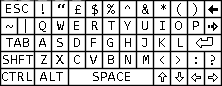
<style>
.page{position:relative;width:222px;height:86px;background:#ffffff}
.page>*{position:absolute;margin:0}
.t1{font:14px "Consolas";color:#000000}
</style>
<div class="page">
<p class="t1" style="left:6px;top:4px;width:22px;height:9px">ESC</p>
<p class="t1" style="left:42px;top:4px;width:2px;height:10px">!</p>
<p class="t1" style="left:58px;top:4px;width:7px;height:4px">“</p>
<p class="t1" style="left:75px;top:5px;width:6px;height:9px">£</p>
<p class="t1" style="left:92px;top:4px;width:6px;height:12px">$</p>
<p class="t1" style="left:107px;top:4px;width:8px;height:10px">%</p>
<p class="t1" style="left:125px;top:5px;width:5px;height:4px">^</p>
<p class="t1" style="left:142px;top:4px;width:7px;height:10px">&amp;</p>
<p class="t1" style="left:161px;top:4px;width:5px;height:6px">*</p>
<p class="t1" style="left:177px;top:3px;width:4px;height:13px">(</p>
<p class="t1" style="left:193px;top:3px;width:4px;height:13px">)</p>
<p class="t1" style="left:6px;top:25px;width:7px;height:3px">~</p>
<p class="t1" style="left:39px;top:21px;width:7px;height:11px">Q</p>
<p class="t1" style="left:57px;top:21px;width:7px;height:9px">W</p>
<p class="t1" style="left:74px;top:21px;width:5px;height:9px">E</p>
<p class="t1" style="left:92px;top:21px;width:6px;height:9px">R</p>
<p class="t1" style="left:108px;top:21px;width:7px;height:9px">T</p>
<p class="t1" style="left:124px;top:21px;width:7px;height:9px">Y</p>
<p class="t1" style="left:142px;top:21px;width:6px;height:9px">U</p>
<p class="t1" style="left:160px;top:21px;width:5px;height:9px">I</p>
<p class="t1" style="left:175px;top:21px;width:7px;height:9px">O</p>
<p class="t1" style="left:193px;top:21px;width:6px;height:9px">P</p>
<p class="t1" style="left:6px;top:38px;width:23px;height:9px">TAB</p>
<p class="t1" style="left:39px;top:38px;width:7px;height:9px">A</p>
<p class="t1" style="left:57px;top:38px;width:6px;height:9px">S</p>
<p class="t1" style="left:74px;top:38px;width:6px;height:9px">D</p>
<p class="t1" style="left:91px;top:38px;width:5px;height:9px">F</p>
<p class="t1" style="left:107px;top:38px;width:6px;height:9px">G</p>
<p class="t1" style="left:125px;top:38px;width:6px;height:9px">H</p>
<p class="t1" style="left:142px;top:38px;width:5px;height:9px">J</p>
<p class="t1" style="left:159px;top:38px;width:6px;height:9px">K</p>
<p class="t1" style="left:178px;top:38px;width:5px;height:9px">L</p>
<p class="t1" style="left:3px;top:55px;width:30px;height:9px">SHFT</p>
<p class="t1" style="left:41px;top:55px;width:6px;height:9px">Z</p>
<p class="t1" style="left:56px;top:55px;width:8px;height:9px">X</p>
<p class="t1" style="left:74px;top:55px;width:6px;height:9px">C</p>
<p class="t1" style="left:90px;top:55px;width:7px;height:9px">V</p>
<p class="t1" style="left:108px;top:55px;width:6px;height:9px">B</p>
<p class="t1" style="left:125px;top:55px;width:6px;height:9px">N</p>
<p class="t1" style="left:143px;top:55px;width:6px;height:9px">M</p>
<p class="t1" style="left:160px;top:56px;width:4px;height:8px">&lt;</p>
<p class="t1" style="left:176px;top:56px;width:4px;height:8px">&gt;</p>
<p class="t1" style="left:195px;top:57px;width:2px;height:7px">:</p>
<p class="t1" style="left:211px;top:55px;width:4px;height:10px">?</p>
<p class="t1" style="left:2px;top:72px;width:30px;height:9px">CTRL</p>
<p class="t1" style="left:40px;top:72px;width:23px;height:9px">ALT</p>
<p class="t1" style="left:93px;top:72px;width:37px;height:9px">SPACE</p>
</div>
